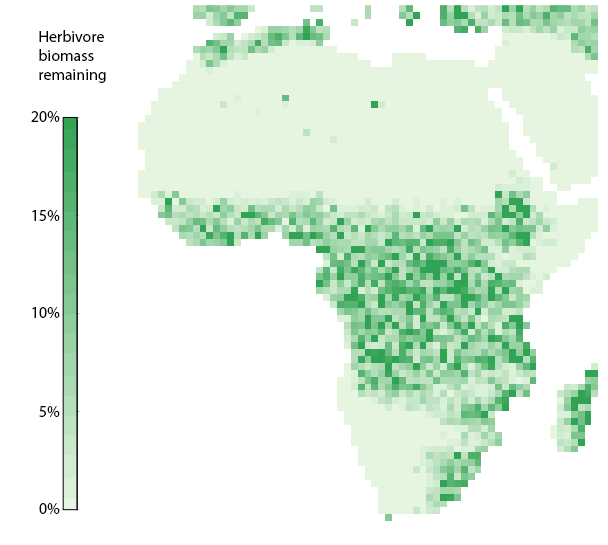
<style>
.page{position:relative;width:608px;height:545px;background:#ffffff}
.page>*{position:absolute;margin:0}
.t1{font:16px "MyriadPro-Regular";color:#000000}
</style>
<div class="page">
<p class="t1" style="left:39px;top:30px;width:67px;height:53px">Herbivore <br>biomass <br>remaining</p>
<p class="t1" style="left:31px;top:111px;width:29px;height:12px">20%</p>
<p class="t1" style="left:32px;top:210px;width:28px;height:12px">15%</p>
<p class="t1" style="left:32px;top:307px;width:28px;height:12px">10%</p>
<p class="t1" style="left:39px;top:406px;width:21px;height:12px">5%</p>
<p class="t1" style="left:39px;top:503px;width:21px;height:12px">0%</p>
</div>
